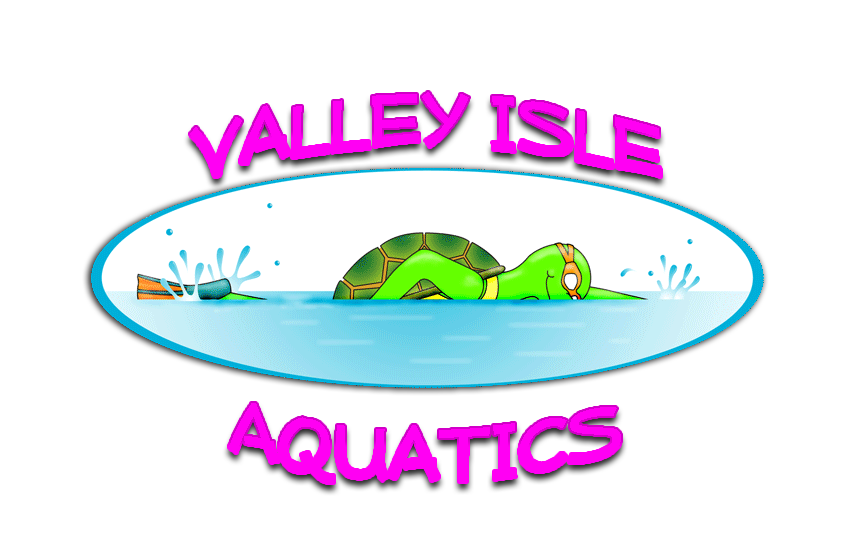
<style>
.page{position:relative;width:850px;height:550px;background:#ffffff}
.page>*{position:absolute;margin:0}
.t1{font:84px "MufferawRg-Regular";color:#ff00f3}
</style>
<div class="page">
<p class="t1" style="left:190px;top:92px;width:471px;height:85px">VALLEY ISLE</p>
<p class="t1" style="left:229px;top:403px;width:392px;height:80px">AQUATICS</p>
</div>
